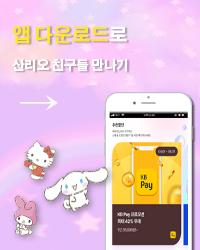
<style>
.page{position:relative;width:200px;height:250px}
.page>*{position:absolute;margin:0}
.t1{font:12.8px "AdobeGothicStd-Bold";color:#ffffff;scale:0.96 1}
.t2{font:19.3px "AdobeGothicStd-Bold";color:#ffe62b;scale:0.96 1}
.t3{font:19.3px "AdobeGothicStd-Bold";color:#ffffff;scale:0.96 1}
.t4{font:41.7px "AdobeGothicStd-Bold";color:#ffffff}
</style>
<div class="page">
<p class="t1" style="left:12px;top:25px;width:116px;height:47px"><span class="t2">앱 다운로드</span><span class="t3">로<br></span>산리오 친구들 만나기</p>
<p class="t4" style="left:20px;top:95px;width:38px;height:16px">→</p>
</div>
